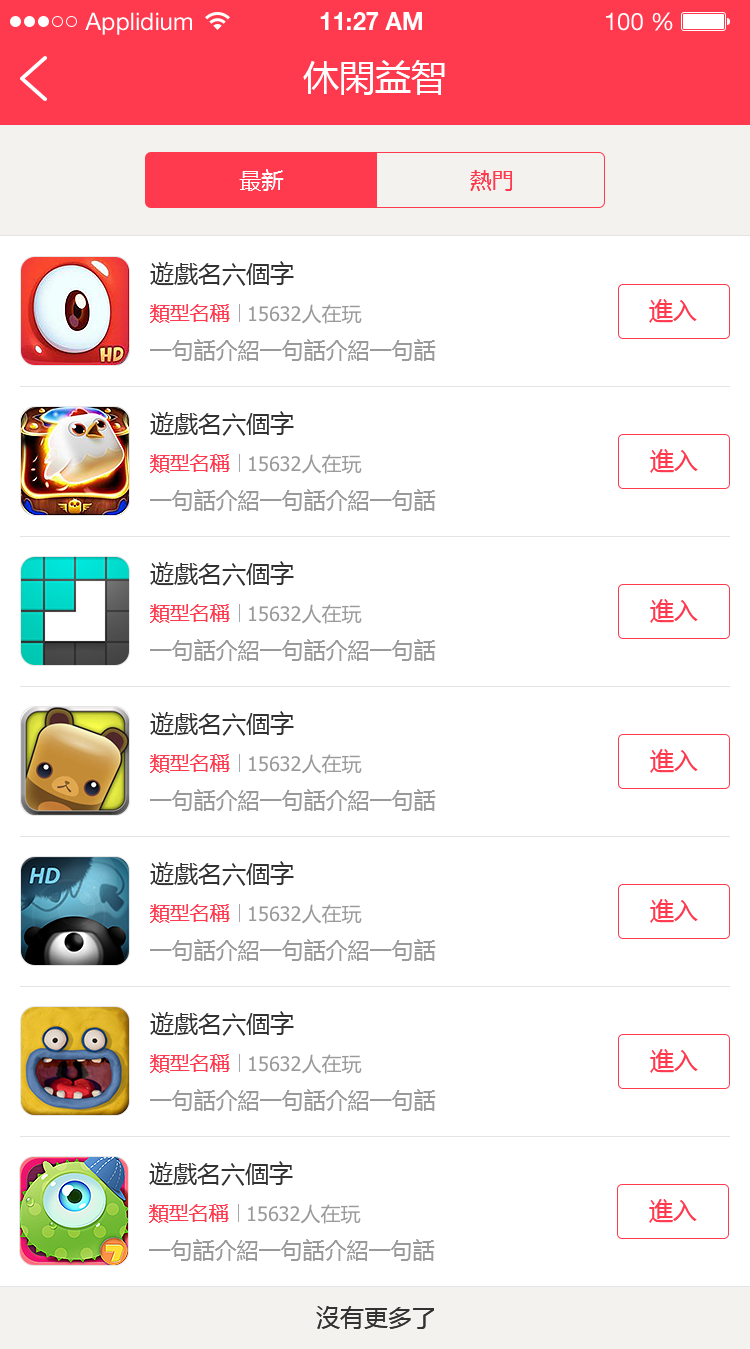
<style>
.page{position:relative;width:750px;height:1349px;background:#ffffff}
.page>*{position:absolute;margin:0}
.t1{font:24px "HelveticaNeueLTStd-Roman";color:#ffffff}
.t2{font:24px "HelveticaNeueLTStd-Bd";color:#ffffff}
.t3{font:36px "MicrosoftYaHei";color:#ffffff}
.t4{font:22px "MicrosoftYaHei";color:#ffffff}
.t5{font:22px "MicrosoftYaHei";color:#ff3a4e}
.t6{font:24px "MicrosoftYaHei";color:#323232}
.t7{font:20px "MicrosoftYaHei";color:#ff3a4e}
.t8{font:20px "Tahoma";color:#9a9a9a}
.t9{font:20px "MicrosoftYaHei";color:#9a9a9a}
.t10{font:24px "MicrosoftYaHei";color:#ff3a4e}
.t11{font:22px "MicrosoftYaHei";color:#9a9a9a}
</style>
<div class="page">
<p class="t1" style="left:85px;top:12px;width:107px;height:23px">Applidium</p>
<p class="t2" style="left:320px;top:12px;width:102px;height:18px">11:27 AM</p>
<p class="t1" style="left:606px;top:12px;width:67px;height:19px">100 %</p>
<p class="t3" style="left:303px;top:60px;width:142px;height:35px">休閑益智</p>
<p class="t4" style="left:239px;top:169px;width:45px;height:22px">最新</p>
<p class="t5" style="left:470px;top:170px;width:42px;height:21px">熱門</p>
<p class="t6" style="left:150px;top:261px;width:144px;height:25px">遊戲名六個字</p>
<p class="t7" style="left:150px;top:304px;width:80px;height:19px">類型名稱</p>
<p class="t8" style="left:249px;top:304px;width:113px;height:20px">15632<span class="t9">人在玩</span></p>
<p class="t10" style="left:649px;top:299px;width:48px;height:24px">進入</p>
<p class="t11" style="left:150px;top:339px;width:286px;height:22px">一句話介紹一句話介紹一句話</p>
<p class="t6" style="left:150px;top:411px;width:144px;height:25px">遊戲名六個字</p>
<p class="t10" style="left:650px;top:449px;width:48px;height:24px">進入</p>
<p class="t7" style="left:150px;top:454px;width:80px;height:19px">類型名稱</p>
<p class="t8" style="left:249px;top:454px;width:113px;height:20px">15632<span class="t9">人在玩</span></p>
<p class="t11" style="left:150px;top:489px;width:286px;height:22px">一句話介紹一句話介紹一句話</p>
<p class="t6" style="left:150px;top:561px;width:144px;height:25px">遊戲名六個字</p>
<p class="t7" style="left:150px;top:604px;width:80px;height:19px">類型名稱</p>
<p class="t8" style="left:249px;top:604px;width:113px;height:20px">15632<span class="t9">人在玩</span></p>
<p class="t10" style="left:650px;top:599px;width:48px;height:24px">進入</p>
<p class="t11" style="left:150px;top:639px;width:286px;height:22px">一句話介紹一句話介紹一句話</p>
<p class="t6" style="left:150px;top:711px;width:144px;height:25px">遊戲名六個字</p>
<p class="t10" style="left:650px;top:749px;width:48px;height:24px">進入</p>
<p class="t7" style="left:150px;top:754px;width:80px;height:19px">類型名稱</p>
<p class="t8" style="left:249px;top:754px;width:113px;height:20px">15632<span class="t9">人在玩</span></p>
<p class="t11" style="left:150px;top:789px;width:286px;height:22px">一句話介紹一句話介紹一句話</p>
<p class="t6" style="left:150px;top:861px;width:144px;height:25px">遊戲名六個字</p>
<p class="t7" style="left:150px;top:904px;width:80px;height:19px">類型名稱</p>
<p class="t8" style="left:249px;top:904px;width:113px;height:20px">15632<span class="t9">人在玩</span></p>
<p class="t10" style="left:650px;top:899px;width:48px;height:24px">進入</p>
<p class="t11" style="left:150px;top:939px;width:286px;height:22px">一句話介紹一句話介紹一句話</p>
<p class="t6" style="left:150px;top:1011px;width:144px;height:25px">遊戲名六個字</p>
<p class="t10" style="left:650px;top:1049px;width:48px;height:24px">進入</p>
<p class="t7" style="left:150px;top:1054px;width:80px;height:19px">類型名稱</p>
<p class="t8" style="left:249px;top:1054px;width:113px;height:20px">15632<span class="t9">人在玩</span></p>
<p class="t11" style="left:150px;top:1089px;width:286px;height:22px">一句話介紹一句話介紹一句話</p>
<p class="t6" style="left:149px;top:1161px;width:144px;height:25px">遊戲名六個字</p>
<p class="t7" style="left:149px;top:1204px;width:80px;height:19px">類型名稱</p>
<p class="t8" style="left:248px;top:1204px;width:113px;height:20px">15632<span class="t9">人在玩</span></p>
<p class="t10" style="left:649px;top:1199px;width:48px;height:24px">進入</p>
<p class="t11" style="left:149px;top:1239px;width:286px;height:22px">一句話介紹一句話介紹一句話</p>
<p class="t6" style="left:316px;top:1306px;width:118px;height:23px">沒有更多了</p>
</div>
